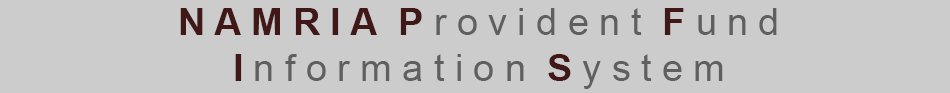
<style>
.page{position:relative;width:950px;height:93px;background:#cccccc}
.page>*{position:absolute;margin:0}
.t1{font:37.8px "ArialMT";color:#5f5f5f}
.t2{font:37.8px "Arial-BoldMT";color:#401818}
</style>
<div class="page">
<p class="t1" style="left:180px;top:8px;width:597px;height:81px;text-align:center"><span class="t2">N A M R I A  P </span>r o v i d e n t  <span class="t2">F </span>u n d  <br><span class="t2">I </span>n f o r m a t i o n  <span class="t2">S </span>y s t e m</p>
</div>
